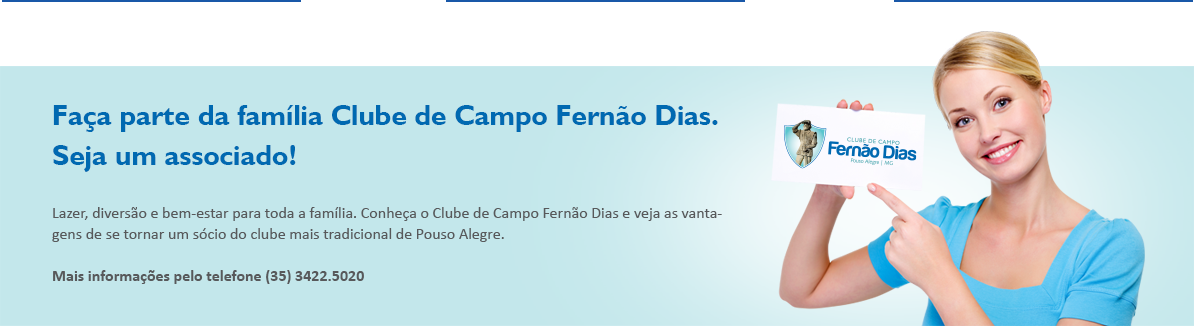
<style>
.page{position:relative;width:1194px;height:326px;background:#c3e7eb}
.page>*{position:absolute;margin:0}
.t1{font:28.7px/40.1px "Humanist521BT-Bold";color:#0069b1}
.t2{font:16px/21px "Calibri";color:#58595b}
.t3{font:16px/21px "Calibri-Bold";color:#58595b}
</style>
<div class="page">
<p class="t1" style="left:53px;top:105px;width:665px;height:67px">Faça parte da família Clube de Campo Fernão Dias.<br>Seja um associado!</p>
<p class="t2" style="left:52px;top:207px;width:670px;height:77px">Lazer, diversão e bem-estar para toda a família. Conheça o Clube de Campo Fernão Dias e veja as vantagens de se tornar um sócio do clube mais tradicional de Pouso Alegre.<br><br><span class="t3">Mais informações pelo telefone (35) 3422.5020</span></p>
</div>
